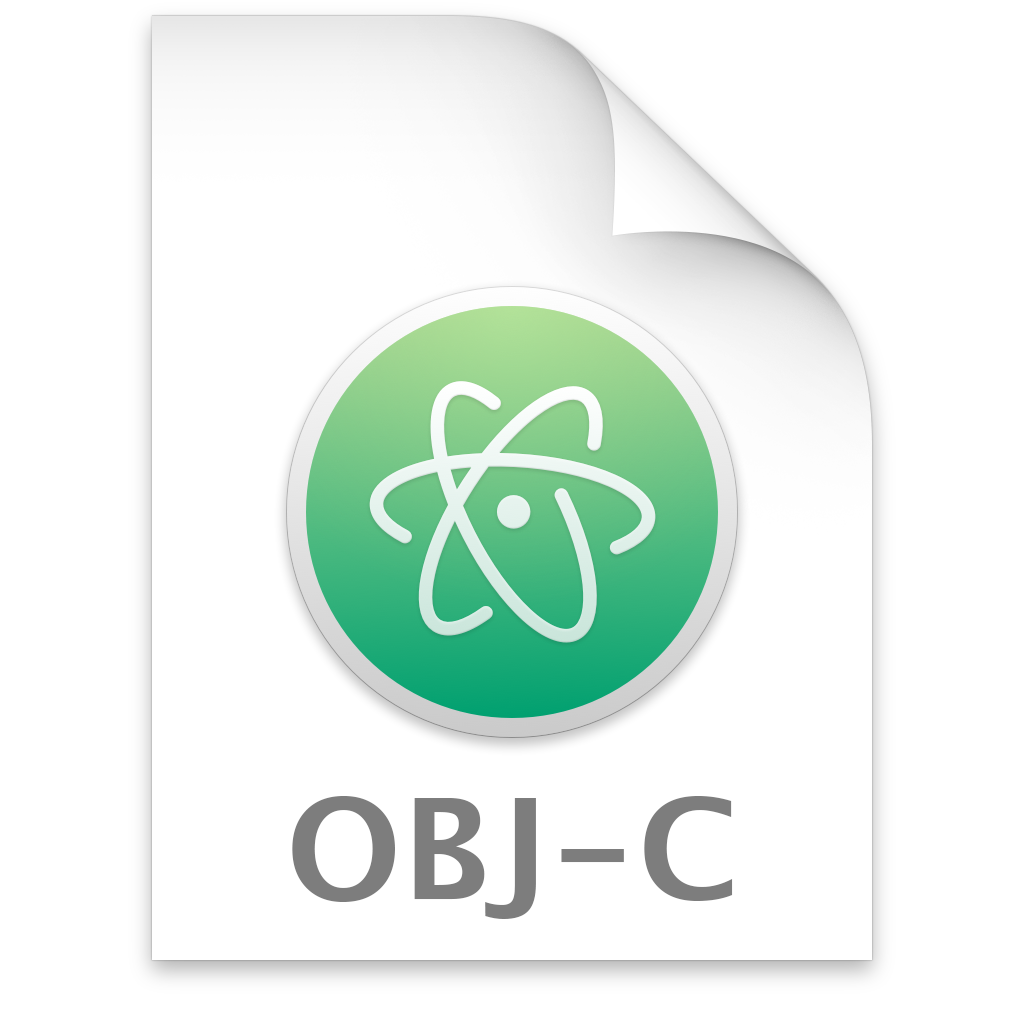
<style>
.page{position:relative;width:1024px;height:1024px;background:#ffffff}
.page>*{position:absolute;margin:0}
.t1{font:140px "LucidaGrande-Bold";color:#7d7d7d}
</style>
<div class="page">
<p class="t1" style="left:292px;top:796px;width:441px;height:123px">OBJ-C</p>
</div>
